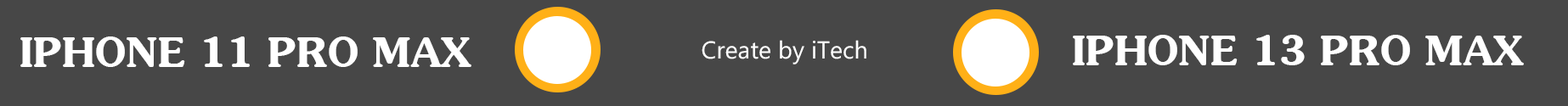
<style>
.page{position:relative;width:1568px;height:106px;background:#474747}
.page>*{position:absolute;margin:0}
.t1{font:40.8px "VNI-Souvir-Bold";color:#ffffff}
.t2{font:24.5px "MicrosoftPhagsPa";color:#ffffff}
</style>
<div class="page">
<p class="t1" style="left:20px;top:37px;width:451px;height:30px">IPHONE 11 PRO MAX</p>
<p class="t2" style="left:702px;top:40px;width:164px;height:25px">Create by iTech</p>
<p class="t1" style="left:1073px;top:35px;width:451px;height:30px">IPHONE 13 PRO MAX</p>
</div>
